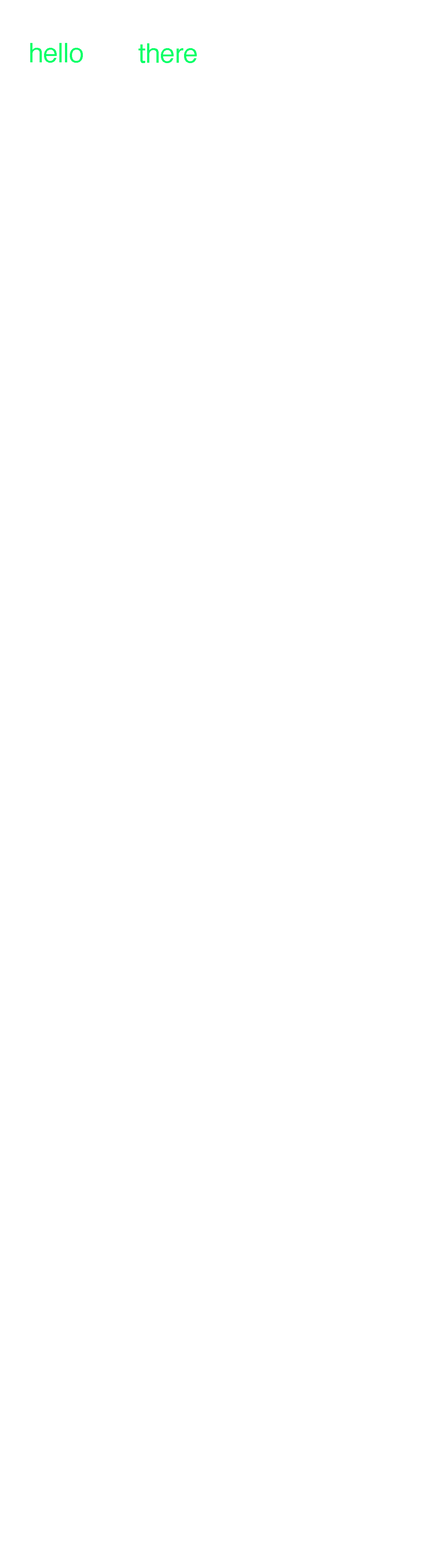
<style>
.page{position:relative;width:448px;height:1568px;background:#ffffff}
.page>*{position:absolute;margin:0}
.t1{font:26.9px "Helvetica";letter-spacing:-0.015em;color:#0aff68}
</style>
<div class="page">
<p class="t1" style="left:30px;top:43px;width:53px;height:20px">hello</p>
<p class="t1" style="left:139px;top:43px;width:58px;height:20px">there</p>
</div>
